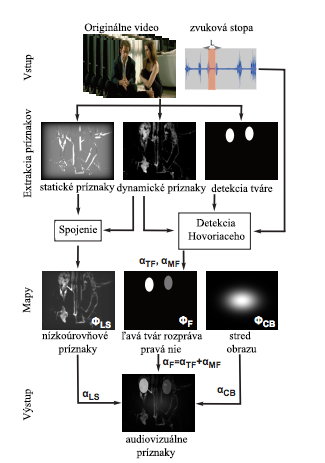
<style>
.page{position:relative;width:325px;height:463px;background:#ffffff}
.page>*{position:absolute;margin:0}
.t1{font:11px "TimesNewRomanPSMT";color:#000000}
</style>
<div class="page">
<p class="t1" style="left:84px;top:23px;width:75px;height:11px">Originálne video</p>
<p class="t1" style="left:190px;top:23px;width:64px;height:11px">zvuková stopa</p>
<p class="t1" style="left:23px;top:54px;width:11px;height:27px;rotate:-90deg">Vstup</p>
<p class="t1" style="left:23px;top:108px;width:11px;height:90px;rotate:-90deg">Extrakcia príznakov</p>
<p class="t1" style="left:40px;top:182px;width:75px;height:11px">statické príznaky</p>
<p class="t1" style="left:116px;top:183px;width:90px;height:11px">dynamické príznaky</p>
<p class="t1" style="left:211px;top:184px;width:62px;height:9px">detekcia tváre</p>
<p class="t1" style="left:188px;top:218px;width:57px;height:22px">Detekcia<br>Hovoriaceho</p>
<p class="t1" style="left:59px;top:225px;width:38px;height:11px">Spojenie</p>
<p class="t1" style="left:22px;top:287px;width:11px;height:26px;rotate:-90deg">Mapy</p>
<p class="t1" style="left:42px;top:331px;width:66px;height:24px">nízkoúrovňové<br>      príznaky</p>
<p class="t1" style="left:121px;top:331px;width:82px;height:24px">ľavá tvár rozpráva<br>       pravá nie</p>
<p class="t1" style="left:226px;top:331px;width:31px;height:22px">stred<br>obrazu</p>
<p class="t1" style="left:23px;top:389px;width:10px;height:32px;rotate:-90deg">Výstup</p>
<p class="t1" style="left:126px;top:434px;width:62px;height:25px">audiovizuálne<br>    príznaky</p>
</div>
